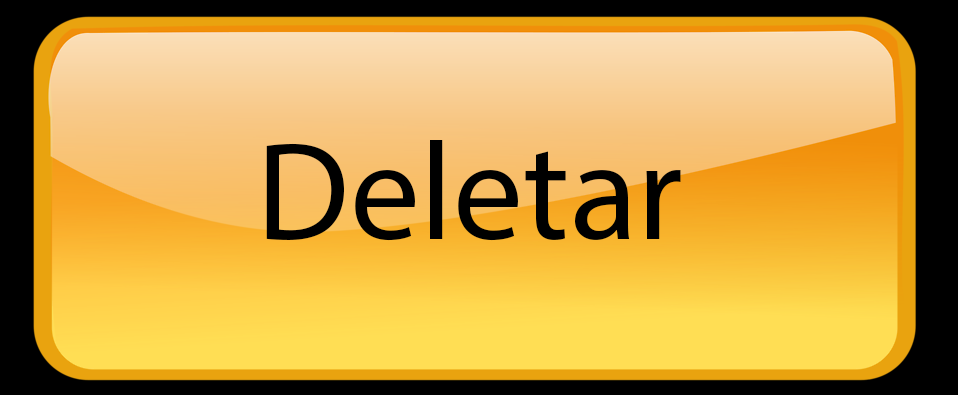
<style>
.page{position:relative;width:958px;height:395px}
.page>*{position:absolute;margin:0}
.t1{font:140px "MyriadPro-Regular";color:#000000}
</style>
<div class="page">
<p class="t1" style="left:266px;top:140px;width:415px;height:101px">Deletar</p>
</div>
